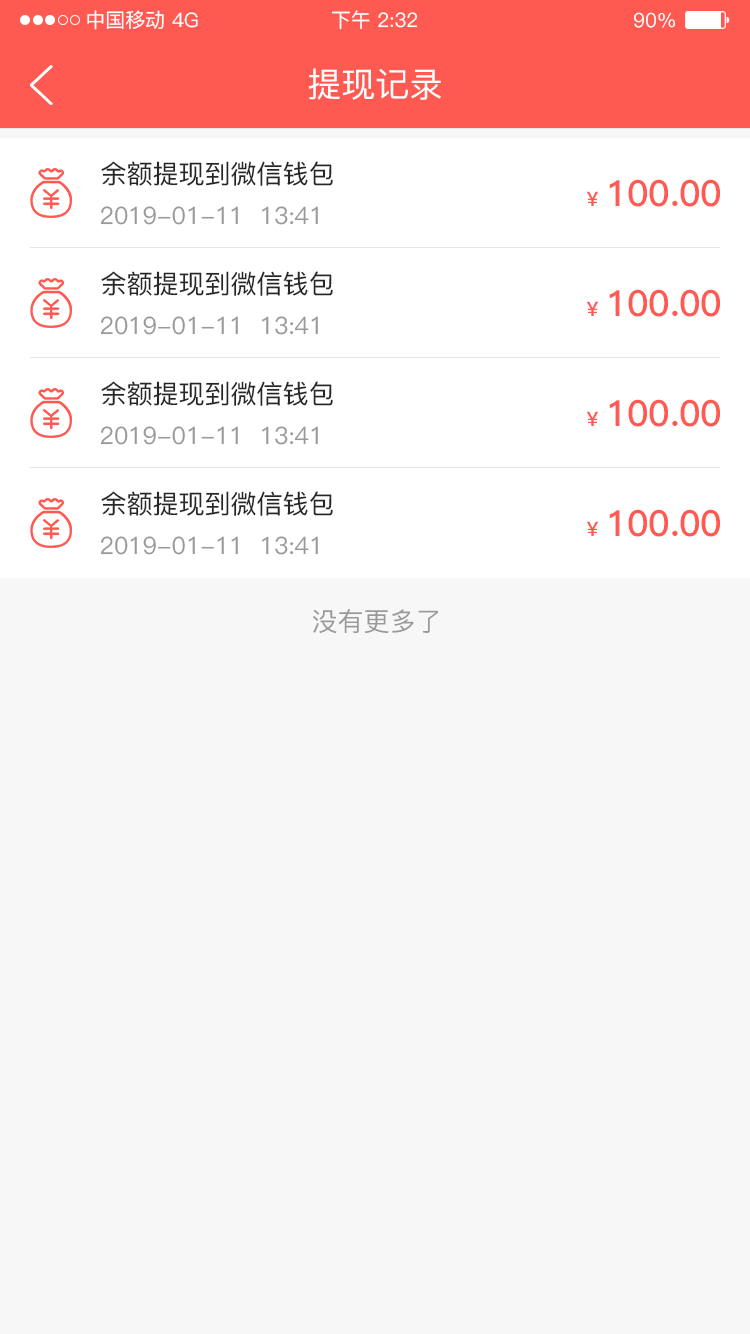
<style>
.page{position:relative;width:750px;height:1334px;background:#f7f7f7}
.page>*{position:absolute;margin:0}
.t1{font:20px "PingFang-SC-Medium";color:#ffffff}
.t2{font:34px "PingFang-SC-Medium";color:#ffffff}
.t3{font:26px "PingFang-SC-Medium";color:#262626}
.t4{font:36px "PingFang-SC-Bold";letter-spacing:-0.01em;color:#fe5a51}
.t5{font:20px "PingFang-SC-Bold";color:#fe5a51}
.t6{font:24px "PingFang-SC-Medium";color:#999999}
.t7{font:26px "PingFang-SC-Medium";color:#999999}
</style>
<div class="page">
<p class="t1" style="left:87px;top:10px;width:77px;height:20px">中国移动</p>
<p class="t1" style="left:172px;top:12px;width:26px;height:16px">4G</p>
<p class="t1" style="left:331px;top:10px;width:87px;height:20px">下午 2:32</p>
<p class="t1" style="left:634px;top:12px;width:41px;height:16px">90%</p>
<p class="t2" style="left:308px;top:68px;width:133px;height:32px">提现记录</p>
<p class="t3" style="left:101px;top:161px;width:232px;height:25px">余额提现到微信钱包</p>
<p class="t4" style="left:609px;top:179px;width:111px;height:28px">100.00</p>
<p class="t5" style="left:586px;top:191px;width:13px;height:15px">￥</p>
<p class="t6" style="left:100px;top:206px;width:218px;height:19px">2019-01-11  13:41</p>
<p class="t3" style="left:101px;top:271px;width:232px;height:25px">余额提现到微信钱包</p>
<p class="t4" style="left:609px;top:289px;width:111px;height:28px">100.00</p>
<p class="t5" style="left:586px;top:301px;width:13px;height:15px">￥</p>
<p class="t6" style="left:100px;top:316px;width:218px;height:19px">2019-01-11  13:41</p>
<p class="t3" style="left:101px;top:381px;width:232px;height:25px">余额提现到微信钱包</p>
<p class="t4" style="left:609px;top:399px;width:111px;height:28px">100.00</p>
<p class="t5" style="left:586px;top:411px;width:13px;height:15px">￥</p>
<p class="t6" style="left:100px;top:426px;width:218px;height:19px">2019-01-11  13:41</p>
<p class="t3" style="left:101px;top:491px;width:232px;height:25px">余额提现到微信钱包</p>
<p class="t4" style="left:609px;top:509px;width:111px;height:28px">100.00</p>
<p class="t5" style="left:586px;top:521px;width:13px;height:15px">￥</p>
<p class="t6" style="left:100px;top:536px;width:218px;height:19px">2019-01-11  13:41</p>
<p class="t7" style="left:312px;top:609px;width:126px;height:25px">没有更多了</p>
</div>
